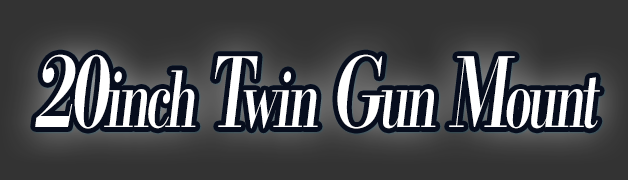
<style>
.page{position:relative;width:628px;height:180px;background:#333333}
.page>*{position:absolute;margin:0}
.t1{font:76.8px "KochoStd-Heavy";letter-spacing:-0.08em;color:#ffffff;font-style:italic;scale:0.66 1}
.t2{font:96px "KochoStd-Heavy";letter-spacing:-0.08em;color:#ffffff;font-style:italic;scale:0.66 1}
</style>
<div class="page">
<p class="t1" style="left:35px;top:54px;width:565px;height:75px"><span class="t2">20</span>inch<span class="t2"> T</span>win<span class="t2"> G</span>un<span class="t2"> M</span>ount</p>
</div>
